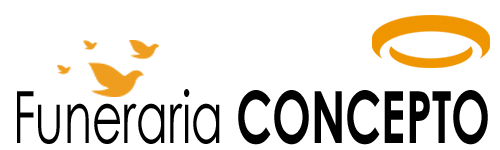
<style>
.page{position:relative;width:500px;height:150px;background:#ffffff}
.page>*{position:absolute;margin:0}
.t1{font:72.1px "CenturyGothic";color:#000000;scale:0.64 1}
.t2{font:72.1px "CenturyGothic-Bold";color:#000000;scale:0.64 1}
</style>
<div class="page">
<p class="t1" style="left:17px;top:89px;width:471px;height:56px">Funeraria<span class="t2"> CONCEPTO</span></p>
</div>
